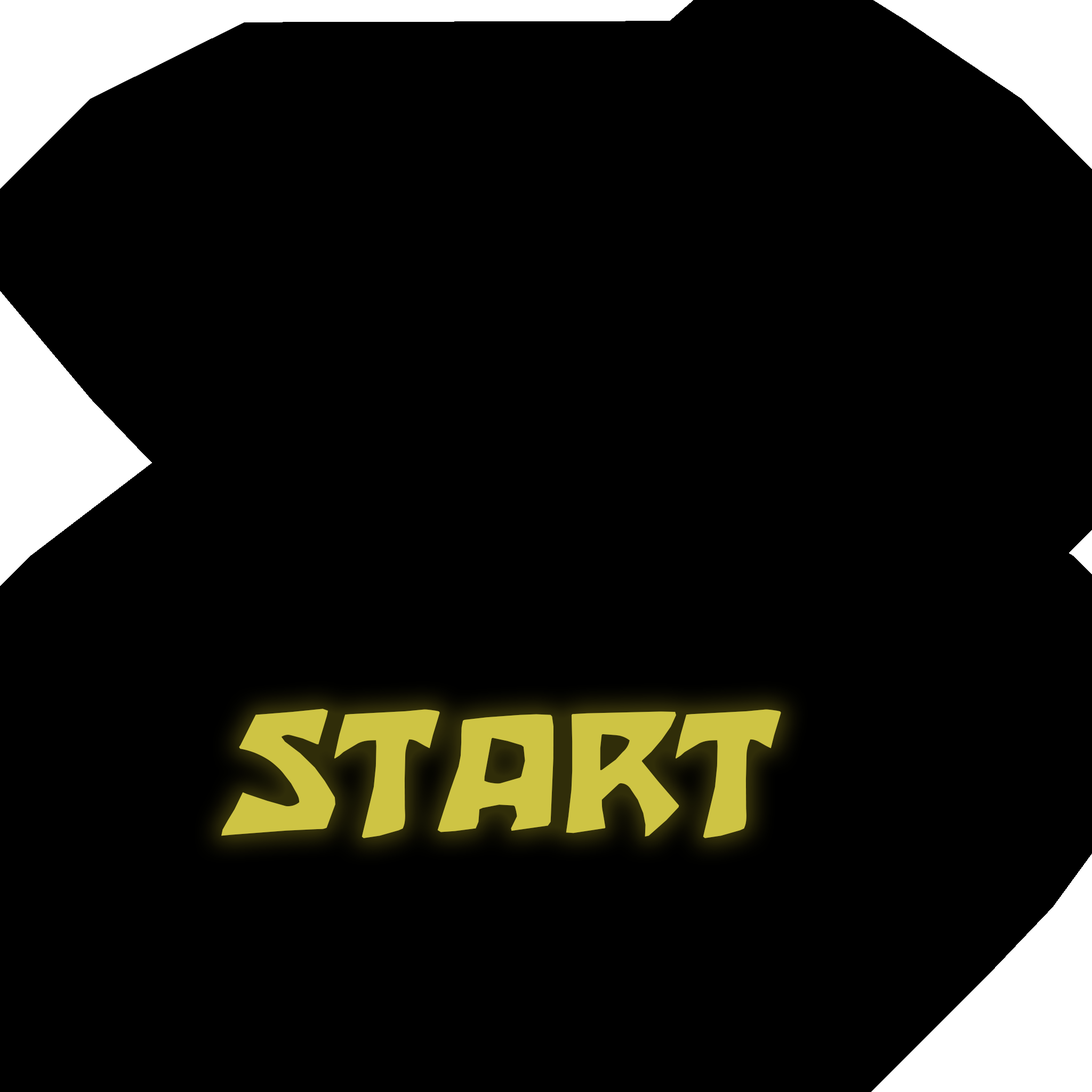
<style>
.page{position:relative;width:1092px;height:1092px;background:#000000}
.page>*{position:absolute;margin:0}
.t1{font:160px "Tarzan";color:#cec444}
</style>
<div class="page">
<p class="t1" style="left:221px;top:709px;width:560px;height:129px">START</p>
</div>
